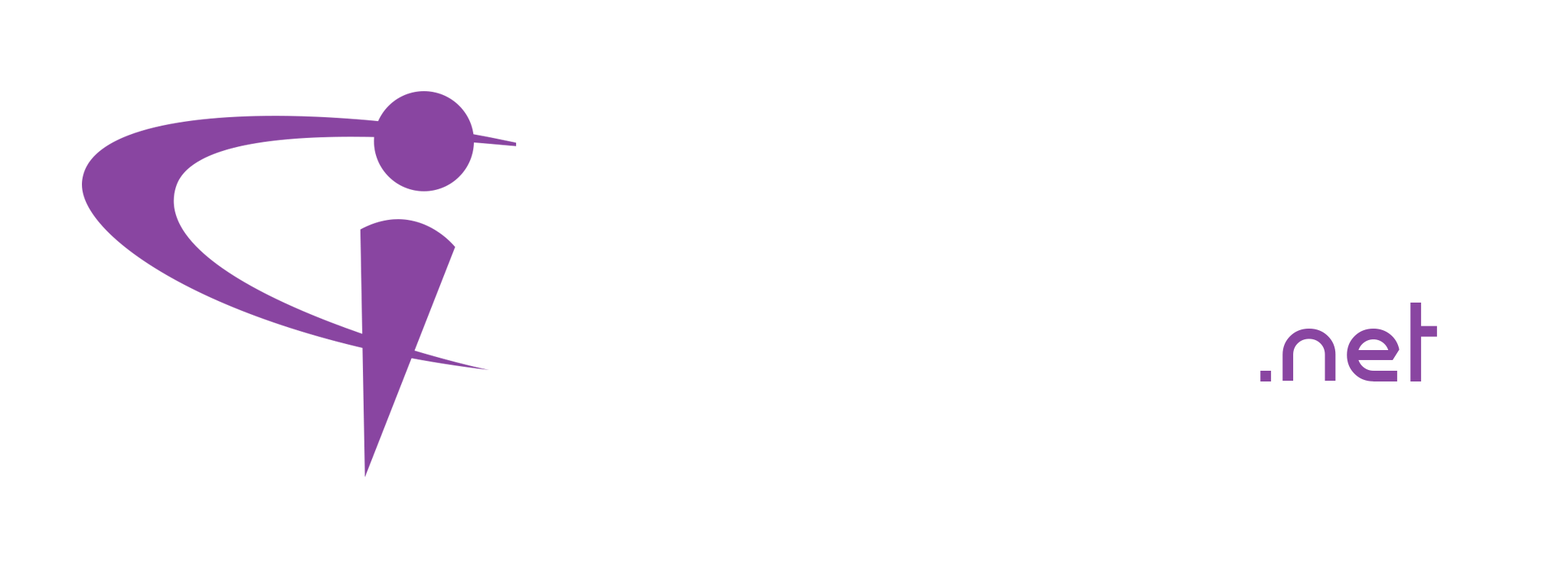
<style>
.page{position:relative;width:1568px;height:586px;background:#ffffff}
.page>*{position:absolute;margin:0}
.t1{font:114.1px "FortuneCity";letter-spacing:0.05em;color:#8945a1}
</style>
<div class="page">
<p class="t1" style="left:1260px;top:302px;width:177px;height:79px">.net</p>
</div>
